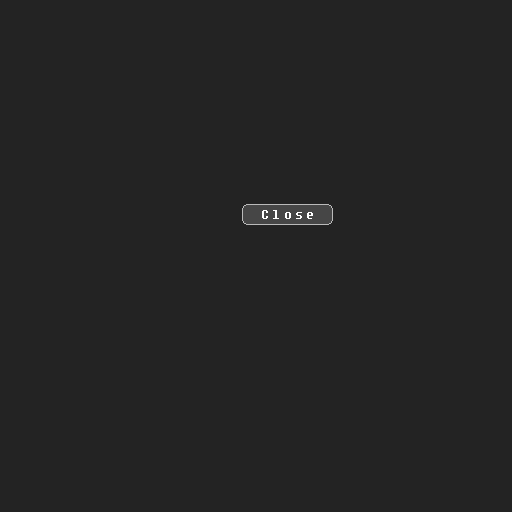
<style>
.page{position:relative;width:512px;height:512px;background:#232323}
.page>*{position:absolute;margin:0}
.t1{font:12px "Fixedsys";letter-spacing:0.28em;color:#ffffff}
</style>
<div class="page">
<p class="t1" style="left:262px;top:210px;width:51px;height:9px">Close</p>
</div>
